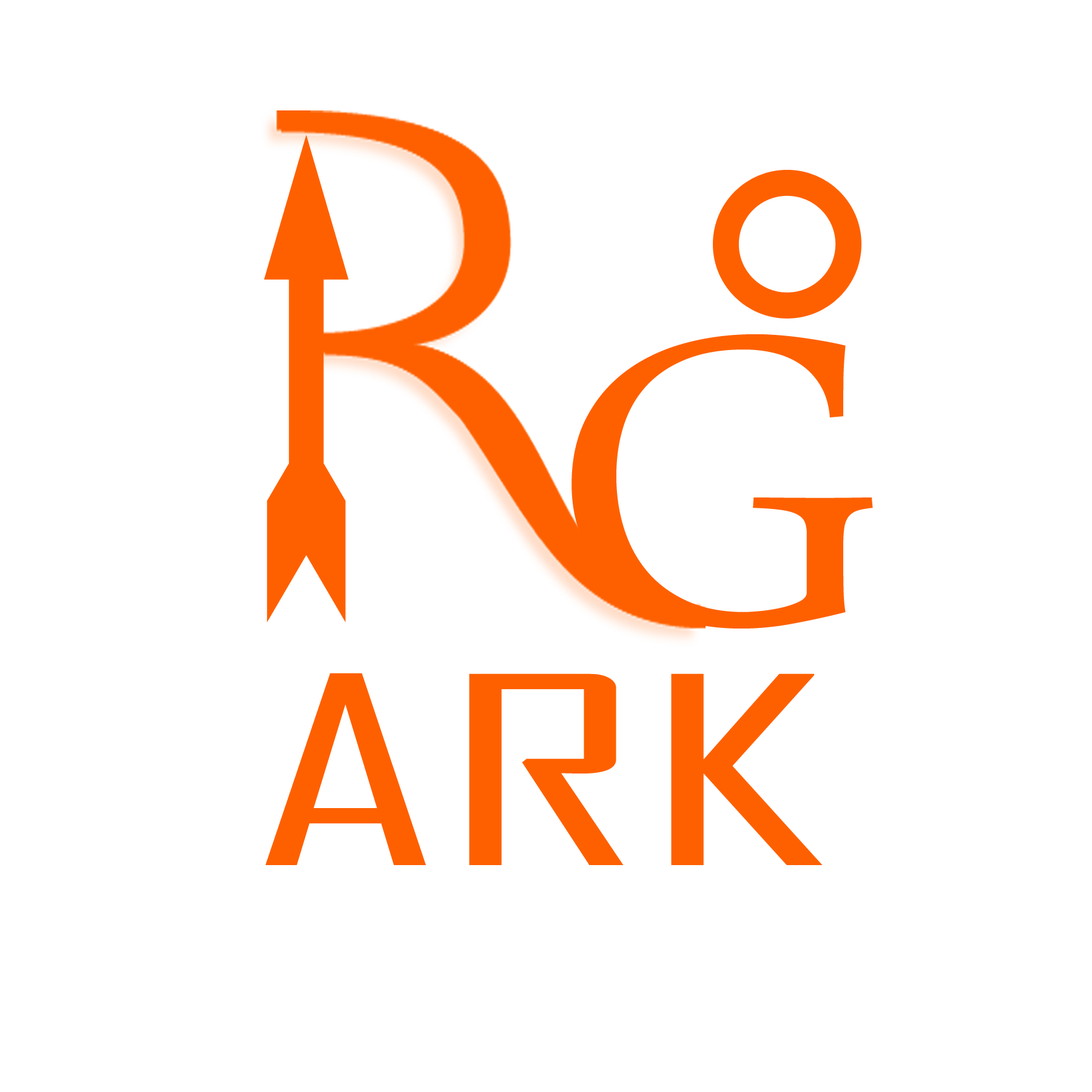
<style>
.page{position:relative;width:1092px;height:1092px;background:#ffffff}
.page>*{position:absolute;margin:0}
.t1{font:602.2px "ArabicTypesetting";color:#fe6000;scale:1.07 1}
.t2{font:249.9px "AgencyFB-Reg";color:#fe6000;scale:1.89 1}
</style>
<div class="page">
<p class="t1" style="left:571px;top:334px;width:302px;height:294px">G</p>
<p class="t2" style="left:265px;top:673px;width:558px;height:192px">ARK</p>
</div>
